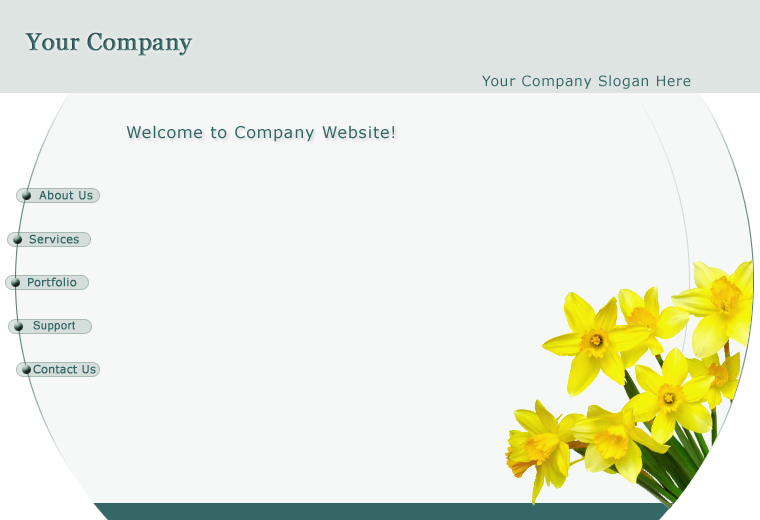
<style>
.page{position:relative;width:760px;height:520px;background:#f6f8f7}
.page>*{position:absolute;margin:0}
.t1{font:24px "Georgia";font-weight:bold}
.t2{font:14px "Verdana";letter-spacing:0.05em;color:#336666}
.t3{font:16px "Verdana";letter-spacing:0.05em;color:#336666}
.t4{font:11px "Verdana";letter-spacing:0.02em;color:#336666;font-weight:bold}
.t5{font:11px "ArialMT";letter-spacing:0.02em;color:#336666;font-weight:bold}
.t6{font:11px "Verdana";color:#336666;font-weight:bold}
</style>
<div class="page">
<p class="t1" style="left:25px;top:32px;width:168px;height:24px">Your Company</p>
<p class="t2" style="left:482px;top:75px;width:209px;height:14px">Your Company Slogan Here</p>
<p class="t3" style="left:126px;top:125px;width:268px;height:17px">Welcome to Company Website!</p>
<p class="t4" style="left:39px;top:190px;width:54px;height:10px">About Us</p>
<p class="t4" style="left:29px;top:234px;width:50px;height:10px">Services</p>
<p class="t4" style="left:28px;top:277px;width:49px;height:10px">Portfolio</p>
<p class="t5" style="left:33px;top:321px;width:42px;height:11px">Support</p>
<p class="t6" style="left:33px;top:364px;width:63px;height:10px">Contact Us</p>
</div>
